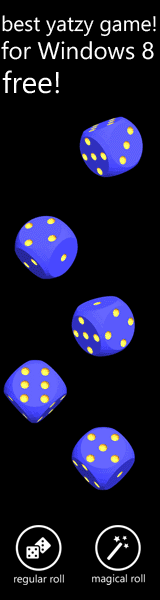
<style>
.page{position:relative;width:160px;height:600px;background:#000000}
.page>*{position:absolute;margin:0}
.t1{font:21px "SegoeWP";color:#ffffff}
.t2{font:24px "SegoeWP";color:#ffffff}
.t3{font:30px "SegoeWP";color:#ffffff}
</style>
<div class="page">
<p class="t1" style="left:2px;top:15px;width:154px;height:22px">best yatzy game!</p>
<p class="t2" style="left:1px;top:40px;width:153px;height:20px">for Windows 8</p>
<p class="t3" style="left:2px;top:70px;width:57px;height:24px">free!</p>
</div>
